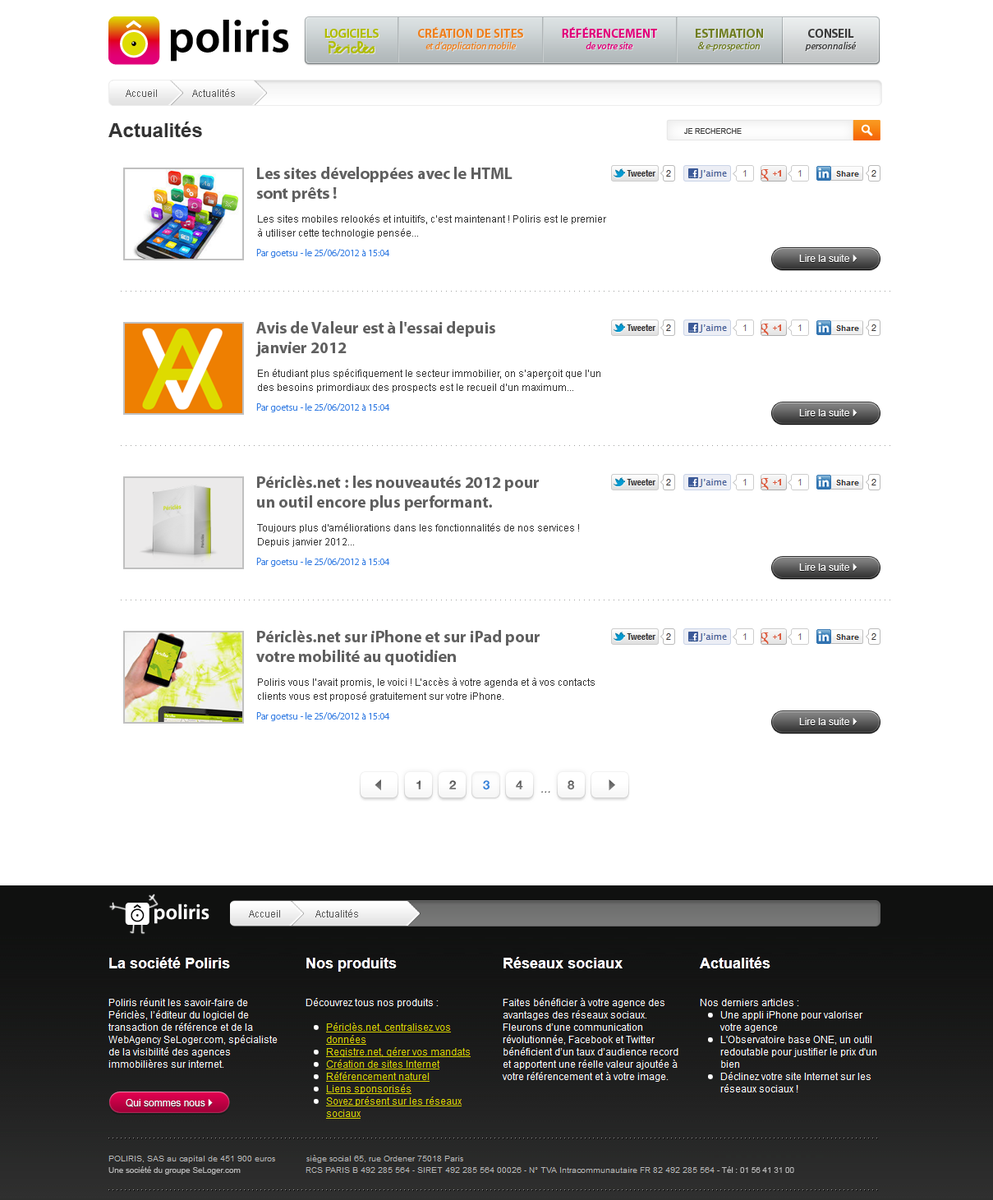
<style>
.page{position:relative;width:993px;height:1200px;background:#ffffff}
.page>*{position:absolute;margin:0}
.t1{font:12.3px "MyriadPro-Bold";letter-spacing:-0.02em;color:#b0bc00}
.t2{font:12.3px "MyriadPro-Bold";color:#ee801f;text-transform:uppercase}
.t3{font:12.3px "MyriadPro-Bold";color:#e1007a;text-transform:uppercase}
.t4{font:12.3px "MyriadPro-Bold";color:#6f7d21;text-transform:uppercase}
.t5{font:12.3px "MyriadPro-Bold";letter-spacing:-0.02em;color:#3c3c3c}
.t6{font:9.9px "MyriadPro-It";color:#ee801f}
.t7{font:9.9px "MyriadPro-It";color:#e1007a}
.t8{font:9.9px "MyriadPro-It";color:#6f7d21}
.t9{font:9.9px "MyriadPro-It";color:#3c3c3c}
.t10{font:9.9px "ArialMT";color:#565656}
.t11{font:19.7px "Arial-BoldMT";color:#343434}
.t12{font:7.4px "ArialMT";color:#3c3c3c;text-transform:uppercase}
.t13{font:16.4px "MyriadPro-Bold";color:#606060}
.t14{font:9.9px/14px "ArialMT";color:#343434}
.t15{font:9.9px "MyriadPro-Light";color:#357de3}
.t16{font:9.9px "ArialMT";color:#ffffff}
.t17{font:9.9px "Wingdings3";color:#ffffff}
.t18{font:12.3px "HelveticaNeue-Bold";letter-spacing:0.03em;color:#676767}
.t19{font:12.3px "HelveticaNeue-Bold";letter-spacing:0.03em;color:#696969}
.t20{font:12.3px "HelveticaNeue-Bold";letter-spacing:0.03em;color:#3482dd}
.t21{font:12.3px "HelveticaNeue-Bold";letter-spacing:0.03em;color:#646464}
.t22{font:11.5px "Helvetica-Oblique";letter-spacing:0.03em;color:#444444}
.t23{font:8.1px "ArialMT";color:#b9b9b9}
</style>
<div class="page">
<p class="t1" style="left:325px;top:29px;width:54px;height:9px">LOGICIELS</p>
<p class="t2" style="left:418px;top:27px;width:105px;height:11px">CRéATION DE SITES</p>
<p class="t3" style="left:562px;top:27px;width:95px;height:11px">Référencement</p>
<p class="t4" style="left:696px;top:29px;width:67px;height:9px">estimation</p>
<p class="t5" style="left:808px;top:29px;width:46px;height:9px">CONSEIL</p>
<p class="t6" style="left:426px;top:41px;width:90px;height:10px">et d’application mobile</p>
<p class="t7" style="left:586px;top:42px;width:47px;height:7px">de votre site</p>
<p class="t8" style="left:698px;top:42px;width:62px;height:9px">&amp; e-prospection</p>
<p class="t9" style="left:805px;top:42px;width:51px;height:9px">personnalisé</p>
<p class="t10" style="left:126px;top:90px;width:31px;height:7px">Accueil</p>
<p class="t10" style="left:192px;top:89px;width:43px;height:8px">Actualités</p>
<p class="t11" style="left:108px;top:122px;width:94px;height:15px">Actualités</p>
<p class="t12" style="left:684px;top:128px;width:58px;height:6px">JE recherche</p>
<p class="t13" style="left:256px;top:167px;width:257px;height:35px">Les sites développées avec le HTML<br>sont prêts !</p>
<p class="t14" style="left:258px;top:214px;width:348px;height:24px">Les sites mobiles relookés et intuitifs, c’est maintenant ! Poliris est le premier à utiliser cette technologie pensée...</p>
<p class="t15" style="left:256px;top:249px;width:133px;height:9px">Par goetsu - le 25/06/2012 à 15:04</p>
<p class="t16" style="left:799px;top:255px;width:59px;height:7px">Lire la suite <span class="t17">}</span></p>
<p class="t13" style="left:256px;top:321px;width:239px;height:36px">Avis de Valeur est à l'essai depuis <br>janvier 2012</p>
<p class="t14" style="left:258px;top:369px;width:343px;height:24px">En étudiant plus spécifiquement le secteur immobilier, on s’aperçoit que l’un des besoins primordiaux des prospects est le recueil d’un maximum...</p>
<p class="t15" style="left:256px;top:403px;width:133px;height:9px">Par goetsu - le 25/06/2012 à 15:04</p>
<p class="t16" style="left:799px;top:409px;width:59px;height:8px">Lire la suite <span class="t17">}</span></p>
<p class="t13" style="left:257px;top:476px;width:282px;height:35px">Périclès.net : les nouveautés 2012 pour <br>un outil encore plus performant.</p>
<p class="t14" style="left:257px;top:523px;width:322px;height:24px">Toujours plus d'améliorations dans les fonctionnalités de nos services ! Depuis janvier 2012...</p>
<p class="t15" style="left:256px;top:558px;width:133px;height:9px">Par goetsu - le 25/06/2012 à 15:04</p>
<p class="t16" style="left:799px;top:564px;width:59px;height:7px">Lire la suite <span class="t17">}</span></p>
<p class="t13" style="left:256px;top:630px;width:284px;height:36px">Périclès.net sur iPhone et sur iPad pour <br>votre mobilité au quotidien</p>
<p class="t14" style="left:258px;top:678px;width:337px;height:24px">Poliris vous l’avait promis, le voici ! L’accès à votre agenda et à vos contacts clients vous est proposé gratuitement sur votre iPhone.</p>
<p class="t15" style="left:256px;top:712px;width:133px;height:9px">Par goetsu - le 25/06/2012 à 15:04</p>
<p class="t16" style="left:799px;top:718px;width:59px;height:8px">Lire la suite <span class="t17">}</span></p>
<p class="t18" style="left:417px;top:781px;width:4px;height:9px">1</p>
<p class="t19" style="left:449px;top:781px;width:7px;height:9px">2</p>
<p class="t20" style="left:483px;top:781px;width:7px;height:9px">3</p>
<p class="t21" style="left:516px;top:781px;width:7px;height:9px">4</p>
<p class="t18" style="left:568px;top:781px;width:7px;height:9px">8</p>
<p class="t22" style="left:541px;top:791px;width:9px;height:2px;opacity:0.89">...</p>
<p class="t10" style="left:249px;top:910px;width:31px;height:8px">Accueil</p>
<p class="t10" style="left:316px;top:910px;width:42px;height:8px">Actualités</p>
<p class="t16" style="left:126px;top:1099px;width:87px;height:9px">Qui sommes nous <span class="t17">}</span></p>
<p class="t23" style="left:108px;top:1167px;width:133px;height:8px">Une société du groupe SeLoger.com</p>
<p class="t23" style="left:717px;top:1167px;width:78px;height:6px">- Tél : 01 56 41 31 00</p>
</div>
